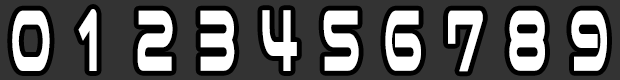
<style>
.page{position:relative;width:620px;height:80px;background:#333333}
.page>*{position:absolute;margin:0}
.t1{font:104.2px "NicoKaku";letter-spacing:0.41em;color:#ffffff;scale:0.5 1}
</style>
<div class="page">
<p class="t1" style="left:12px;top:9px;width:595px;height:63px">0123456789</p>
</div>
